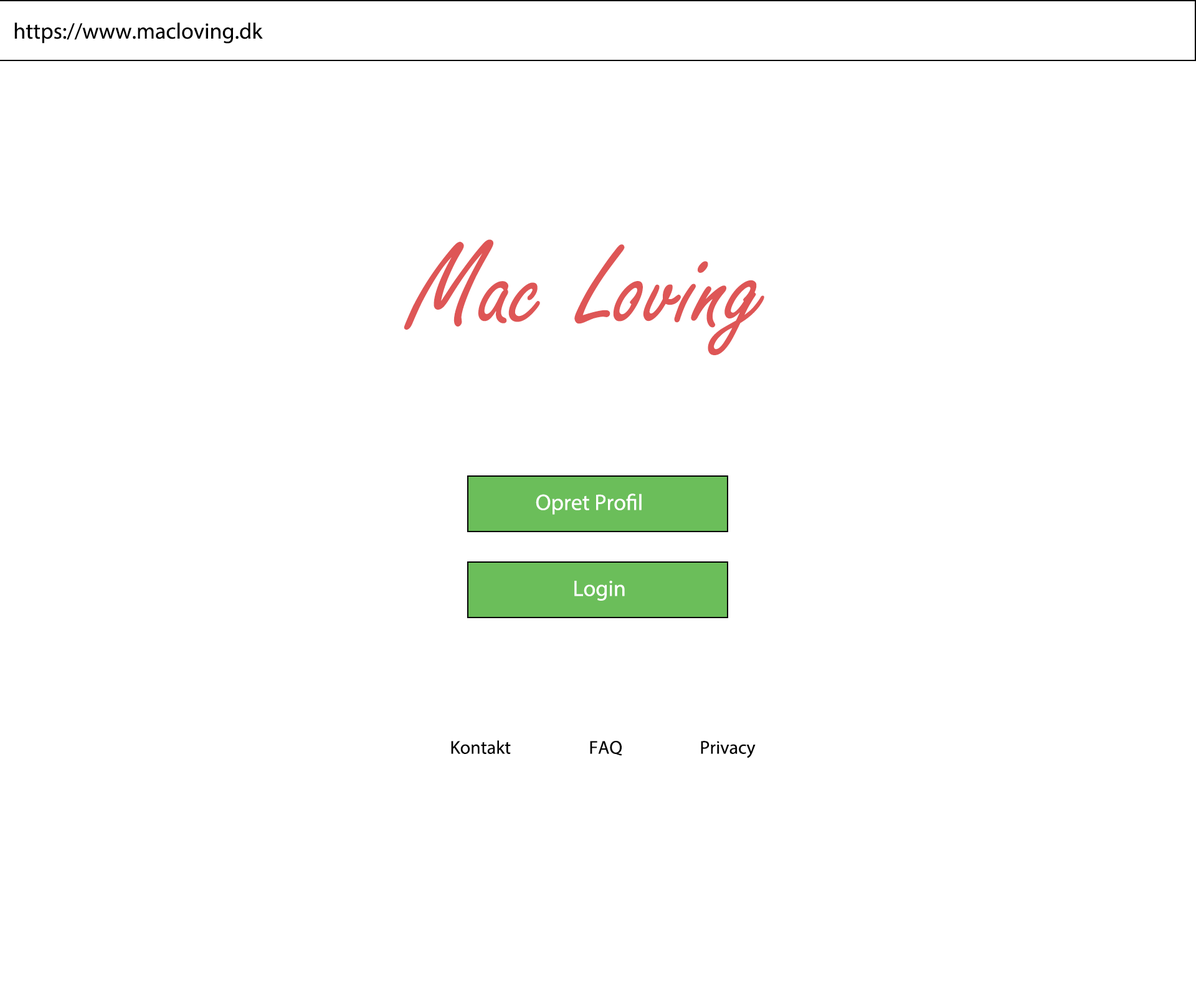
<style>
.page{position:relative;width:1196px;height:997px;background:#ffffff}
.page>*{position:absolute;margin:0}
.t1{font:22.4px "MyriadPro-Regular";color:#000000}
.t2{font:124.6px "FreestyleScript-Regular";color:#de5656}
.t3{font:22.4px "MyriadPro-Regular";color:#ffffff}
.t4{font:18.7px "MyriadPro-Regular";color:#000000}
</style>
<div class="page">
<p class="t1" style="left:14px;top:22px;width:249px;height:22px">https://www.macloving.dk</p>
<p class="t2" style="left:404px;top:239px;width:360px;height:116px">Mac Loving</p>
<p class="t3" style="left:536px;top:493px;width:106px;height:22px">Opret Profil</p>
<p class="t3" style="left:574px;top:581px;width:51px;height:20px">Login</p>
<p class="t4" style="left:451px;top:740px;width:60px;height:14px">Kontakt</p>
<p class="t4" style="left:590px;top:741px;width:32px;height:15px">FAQ</p>
<p class="t4" style="left:701px;top:741px;width:55px;height:17px">Privacy</p>
</div>
